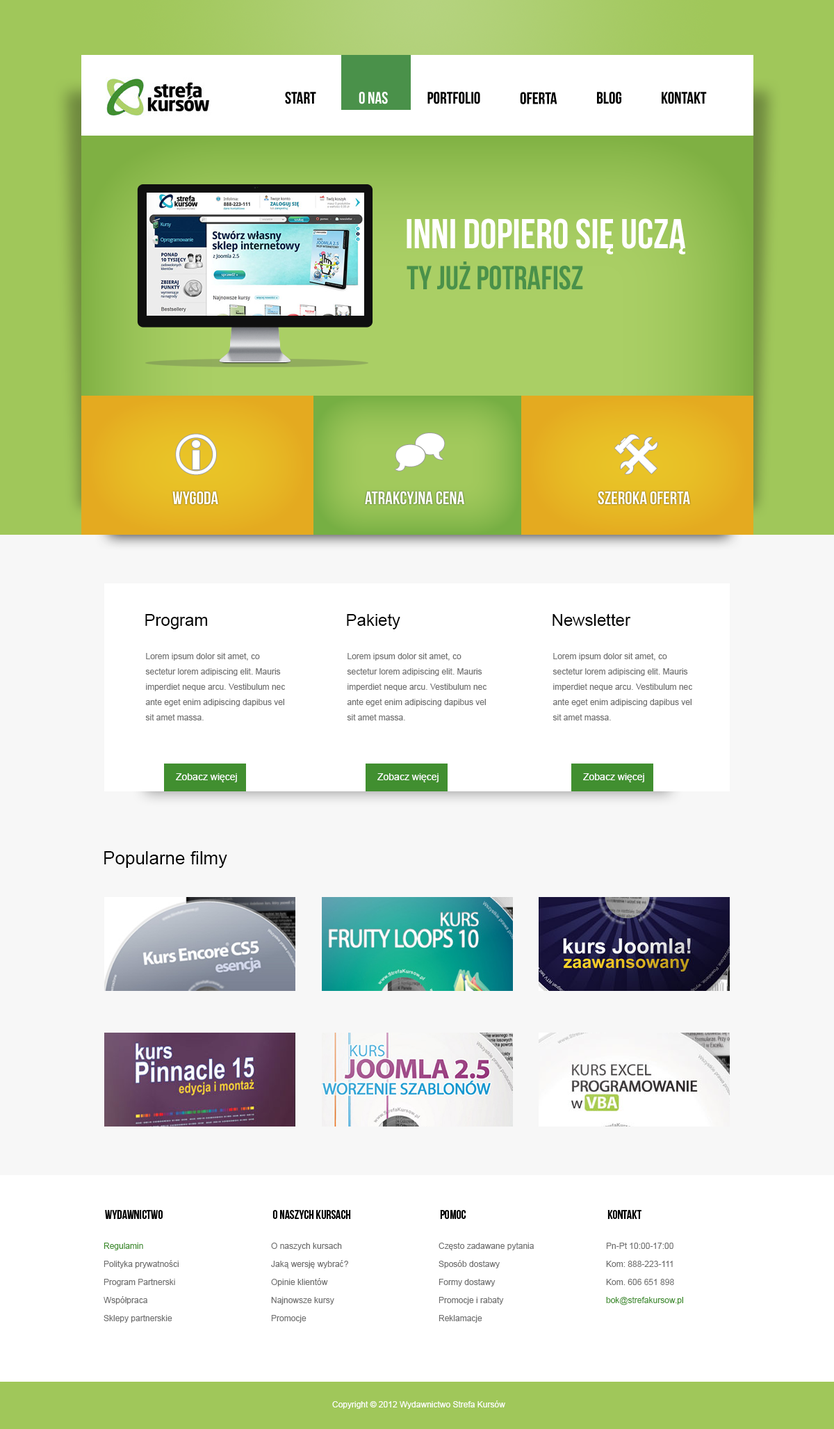
<style>
.page{position:relative;width:834px;height:1429px;background:#ffffff}
.page>*{position:absolute;margin:0}
.t1{font:16.7px "BebasNeue";color:#000000}
.t2{font:16.7px "BebasNeue";color:#ffffff}
.t3{font:41.7px "BebasNeue";color:#ffffff}
.t4{font:33.4px "BebasNeue";color:#4a914a}
.t5{font:18.1px "BebasNeue";color:#ffffff}
.t6{font:16.7px "ArialMT";color:#000000}
.t7{font:8.3px/15.3px "ArialMT";color:#707070}
.t8{font:9.7px "ArialMT";color:#ffffff}
.t9{font:18.1px "ArialMT";color:#000000}
.t10{font:12.5px "BebasNeue";color:#000000}
.t11{font:8.3px/18.1px "ArialMT";color:#707070}
.t12{font:8.3px/18.1px "ArialMT";color:#418f30}
.t13{font:8.3px "ArialMT";color:#ffffff}
</style>
<div class="page">
<p class="t1" style="left:285px;top:92px;width:31px;height:12px">start</p>
<p class="t2" style="left:359px;top:92px;width:29px;height:12px">O nas</p>
<p class="t1" style="left:428px;top:92px;width:53px;height:12px">Portfolio</p>
<p class="t1" style="left:520px;top:92px;width:38px;height:12px">oferta</p>
<p class="t1" style="left:597px;top:92px;width:25px;height:12px">blog</p>
<p class="t1" style="left:662px;top:92px;width:45px;height:12px">kontakt</p>
<p class="t3" style="left:407px;top:218px;width:279px;height:37px">Inni dopiero się uczą</p>
<p class="t4" style="left:407px;top:261px;width:176px;height:29px">ty już potrafisz</p>
<p class="t5" style="left:172px;top:491px;width:46px;height:14px">wygoda</p>
<p class="t5" style="left:172px;top:491px;width:46px;height:14px">wygoda</p>
<p class="t5" style="left:365px;top:491px;width:100px;height:14px">atrakcyjna cena</p>
<p class="t5" style="left:365px;top:491px;width:100px;height:14px">atrakcyjna cena</p>
<p class="t5" style="left:598px;top:491px;width:93px;height:14px">szeroka oferta</p>
<p class="t5" style="left:598px;top:491px;width:93px;height:14px">szeroka oferta</p>
<p class="t6" style="left:145px;top:614px;width:63px;height:15px">Program</p>
<p class="t6" style="left:347px;top:613px;width:54px;height:16px">Pakiety</p>
<p class="t6" style="left:553px;top:613px;width:78px;height:13px">Newsletter</p>
<p class="t7" style="left:145px;top:653px;width:140px;height:67px">Lorem ipsum dolor sit amet, co sectetur lorem adipiscing elit. Mauris imperdiet neque arcu. Vestibulum nec ante eget enim adipiscing dapibus vel sit amet massa.</p>
<p class="t7" style="left:347px;top:653px;width:140px;height:67px">Lorem ipsum dolor sit amet, co sectetur lorem adipiscing elit. Mauris imperdiet neque arcu. Vestibulum nec ante eget enim adipiscing dapibus vel sit amet massa.</p>
<p class="t7" style="left:553px;top:653px;width:140px;height:67px">Lorem ipsum dolor sit amet, co sectetur lorem adipiscing elit. Mauris imperdiet neque arcu. Vestibulum nec ante eget enim adipiscing dapibus vel sit amet massa.</p>
<p class="t8" style="left:176px;top:773px;width:61px;height:9px">Zobacz więcej</p>
<p class="t8" style="left:378px;top:773px;width:61px;height:9px">Zobacz więcej</p>
<p class="t8" style="left:583px;top:773px;width:62px;height:9px">Zobacz więcej</p>
<p class="t9" style="left:104px;top:851px;width:123px;height:17px">Popularne filmy</p>
<p class="t10" style="left:105px;top:1210px;width:58px;height:9px">wydawnictwo</p>
<p class="t10" style="left:273px;top:1210px;width:78px;height:9px">o naszych kursach</p>
<p class="t10" style="left:440px;top:1210px;width:27px;height:9px">pomoc</p>
<p class="t10" style="left:608px;top:1210px;width:34px;height:9px">kontakt</p>
<p class="t11" style="left:104px;top:1243px;width:75px;height:80px"><span class="t12">Regulamin<br></span>Polityka prywatności<br>Program Partnerski<br>Współpraca<br>Sklepy partnerskie</p>
<p class="t11" style="left:271px;top:1243px;width:77px;height:80px">O naszych kursach<br>Jaką wersję wybrać?<br>Opinie klientów<br>Najnowsze kursy<br>Promocje</p>
<p class="t11" style="left:439px;top:1243px;width:95px;height:80px">Często zadawane pytania<br>Sposób dostawy<br>Formy dostawy<br>Promocje i rabaty<br>Reklamacje</p>
<p class="t11" style="left:606px;top:1243px;width:78px;height:62px">Pn-Pt 10:00-17:00<br>Kom: 888-223-111<br>Kom. 606 651 898<br><span class="t12">bok@strefakursow.pl</span></p>
<p class="t13" style="left:332px;top:1400px;width:174px;height:9px">Copyright © 2012 Wydawnictwo Strefa Kursów</p>
</div>
